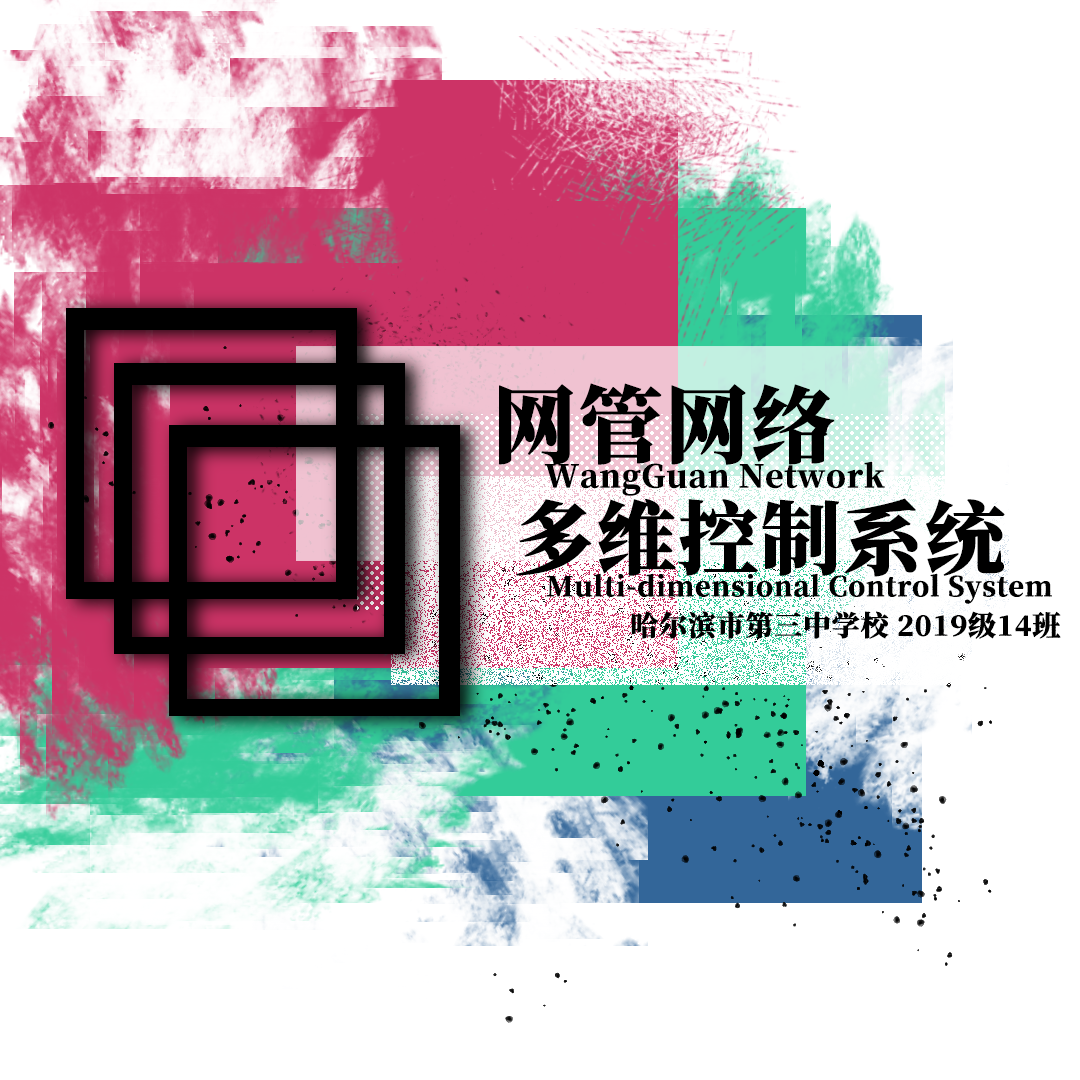
<style>
.page{position:relative;width:1080px;height:1080px;background:#ffffff}
.page>*{position:absolute;margin:0}
.t1{font:27px/28.4px "SourceHanSerifCN-Heavy";color:#000000;font-weight:bold}
.t2{font:84px/119.4px "SourceHanSerifSC-Heavy";color:#000000;font-weight:bold}
.t3{font:31px/31.4px "SourceHanSerifSC-Heavy";color:#000000;font-weight:bold}
.t4{font:80px/80.4px "SourceHanSerifSC-Heavy";color:#000000;font-weight:bold}
.t5{font:28px/39.4px "SourceHanSerifCN-Heavy";color:#000000;font-weight:bold}
</style>
<div class="page">
<p class="t1" style="left:499px;top:383px;width:562px;height:256px"><span class="t2">网管网络<br> </span><span class="t3">     WangGuan Network<br></span><span class="t4"> 多维控制系统<br>       </span>Multi-dimensional Control System<br><span class="t5">                  哈尔滨市第三中学校 2019级14班</span></p>
</div>
